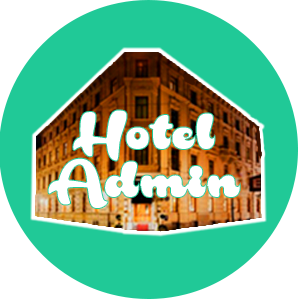
<style>
.page{position:relative;width:300px;height:300px;background:#20c997}
.page>*{position:absolute;margin:0}
.t1{font:60px/48px "RakoonPersonalUse";letter-spacing:0.01em;color:#ffffff}
</style>
<div class="page">
<p class="t1" style="left:47px;top:109px;width:194px;height:100px;text-align:center">Hotel<br>Admin</p>
</div>
